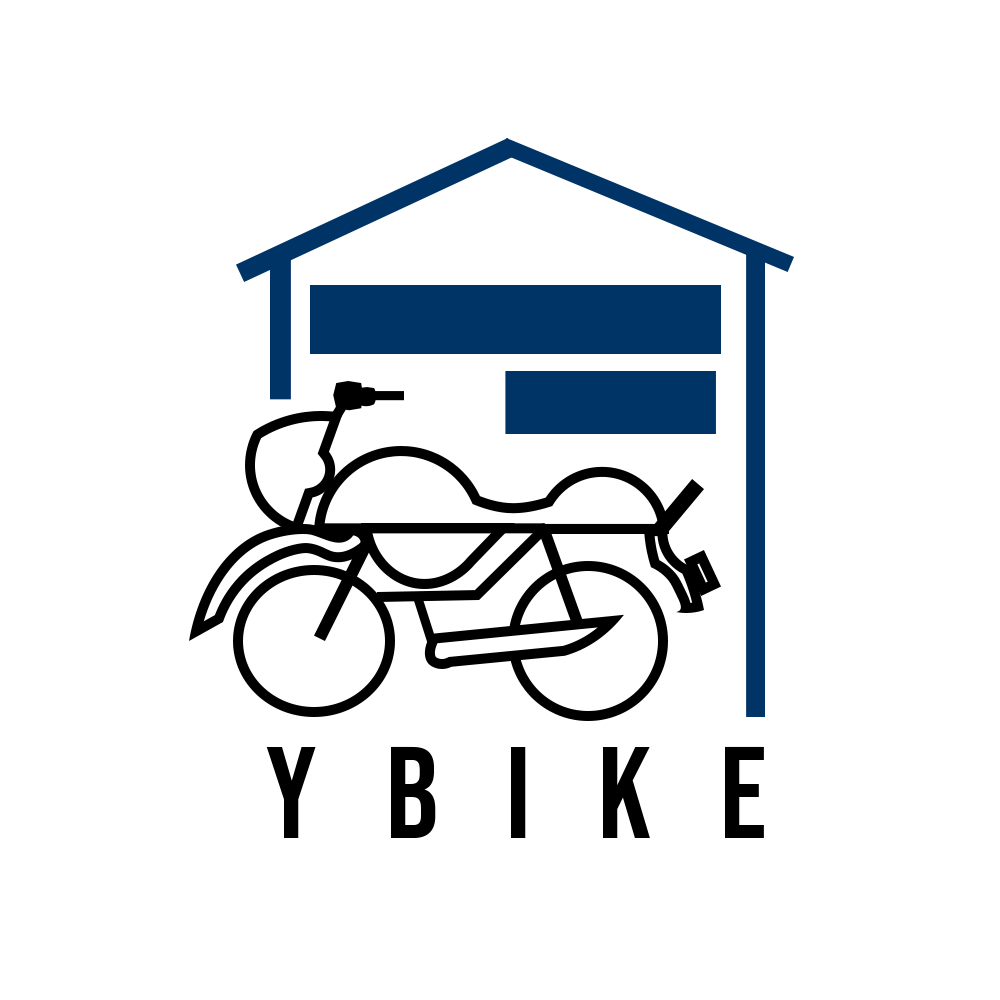
<style>
.page{position:relative;width:1000px;height:1000px;background:#ffffff}
.page>*{position:absolute;margin:0}
.t1{font:129.4px "BebasNeue-Regular";letter-spacing:0.54em;color:#000000}
</style>
<div class="page">
<p class="t1" style="left:266px;top:746px;width:498px;height:92px">YBIKE</p>
</div>
